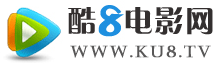
<style>
.page{position:relative;width:216px;height:65px;background:#ffffff}
.page>*{position:absolute;margin:0}
.t1{font:29.3px "FZCQJW--GB1-0";letter-spacing:0.05em;color:#332f2f}
.t2{font:16px "Castellar";letter-spacing:0.1em;color:#585757;font-weight:bold}
</style>
<div class="page">
<p class="t1" style="left:68px;top:7px;width:145px;height:28px">酷  电影网</p>
<p class="t2" style="left:70px;top:45px;width:141px;height:13px">www.ku8.tv</p>
</div>
